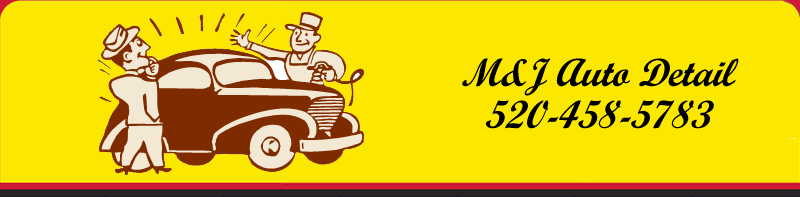
<style>
.page{position:relative;width:800px;height:197px;background:#fce700}
.page>*{position:absolute;margin:0}
.t1{font:39px/42px "ScriptMTBold";color:#000000;font-style:italic}
</style>
<div class="page">
<p class="t1" style="left:462px;top:58px;width:277px;height:71px;text-align:center">M&amp;J Auto Detail<br>520-458-5783</p>
</div>
